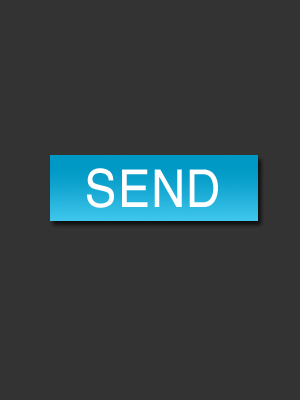
<style>
.page{position:relative;width:300px;height:400px;background:#333333}
.page>*{position:absolute;margin:0}
.t1{font:52.3px "Helvetica";letter-spacing:0.02em;color:#ffffff;scale:0.92 1}
</style>
<div class="page">
<p class="t1" style="left:87px;top:168px;width:131px;height:40px">SEND</p>
</div>
